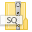
<style>
.page{position:relative;width:32px;height:32px;background:#ffffff}
.page>*{position:absolute;margin:0}
.t1{font:8px "SegoeUI"}
</style>
<div class="page">
<p class="t1" style="left:7px;top:17px;width:10px;height:7px">SQ</p>
</div>
